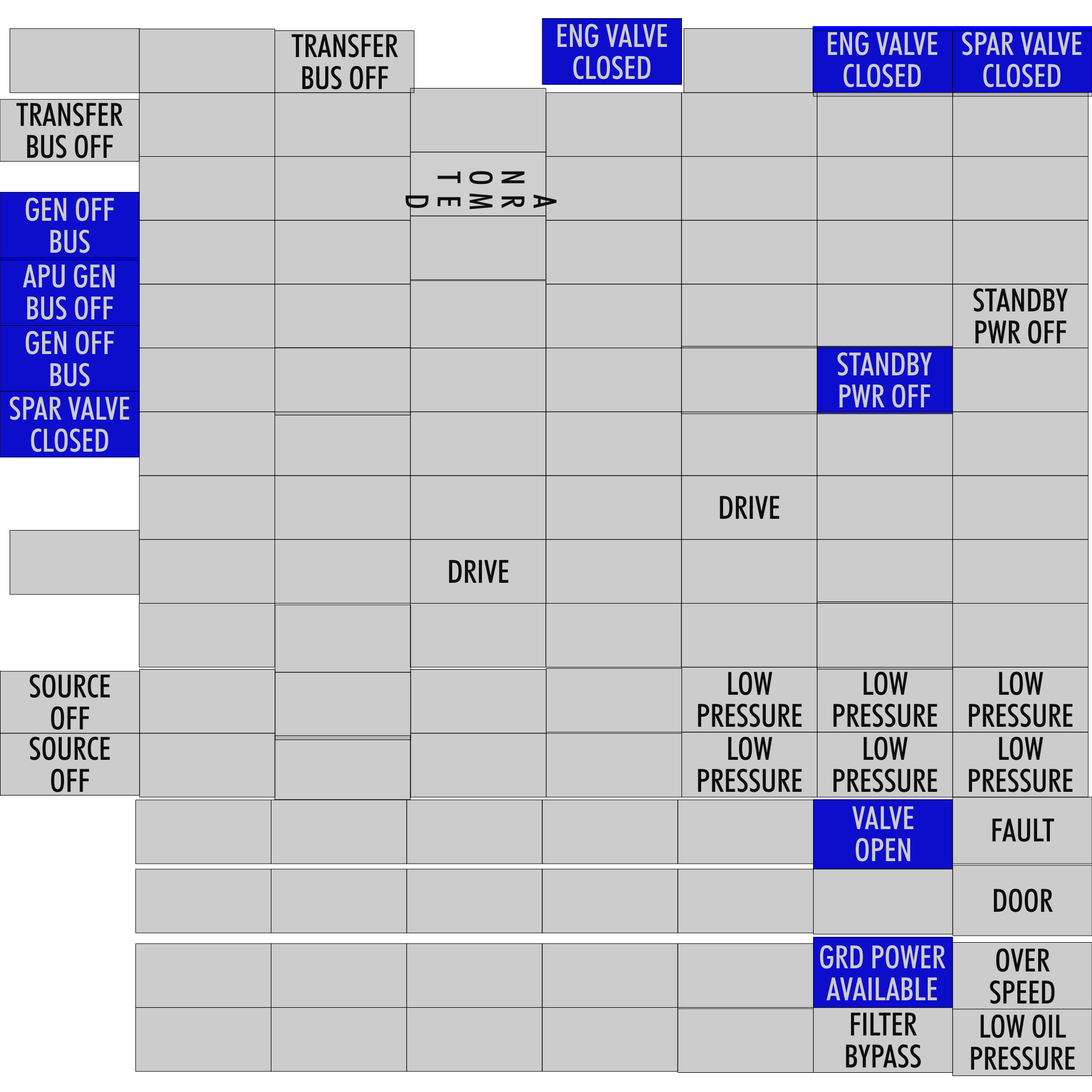
<style>
.page{position:relative;width:1092px;height:1092px;background:#cccccc}
.page>*{position:absolute;margin:0}
.t1{font:32px "FuturaBT-MediumCondensed";color:#cccccc}
.t2{font:32px "FuturaBT-MediumCondensed";color:#000000}
.t3{font:32px/24px "FuturaBT-MediumCondensed";color:#000000}
</style>
<div class="page">
<p class="t1" style="left:557px;top:23px;width:110px;height:56px;text-align:center">ENG VALVE<br>CLOSED</p>
<p class="t2" style="left:291px;top:34px;width:107px;height:56px;text-align:center">TRANSFER<br>BUS OFF</p>
<p class="t1" style="left:828px;top:31px;width:109px;height:56px;text-align:center">ENG VALVE<br>CLOSED</p>
<p class="t1" style="left:962px;top:31px;width:120px;height:56px;text-align:center">SPAR VALVE<br>CLOSED</p>
<p class="t2" style="left:16px;top:102px;width:107px;height:56px;text-align:center">TRANSFER<br>BUS OFF</p>
<p class="t3" style="left:405px;top:171px;width:152px;height:39px;text-align:center;rotate:90deg">ARMED<br>NOT</p>
<p class="t1" style="left:26px;top:197px;width:88px;height:56px;text-align:center">GEN OFF<br>BUS</p>
<p class="t1" style="left:23px;top:264px;width:92px;height:56px;text-align:center">APU GEN<br>BUS OFF</p>
<p class="t2" style="left:973px;top:288px;width:95px;height:56px;text-align:center">STANDBY<br>PWR OFF</p>
<p class="t1" style="left:26px;top:331px;width:88px;height:56px;text-align:center">GEN OFF<br>BUS</p>
<p class="t1" style="left:837px;top:352px;width:95px;height:56px;text-align:center">STANDBY<br>PWR OFF</p>
<p class="t1" style="left:10px;top:396px;width:120px;height:56px;text-align:center">SPAR VALVE<br>CLOSED</p>
<p class="t2" style="left:720px;top:496px;width:60px;height:23px">DRIVE</p>
<p class="t2" style="left:449px;top:560px;width:60px;height:23px">DRIVE</p>
<p class="t2" style="left:29px;top:674px;width:81px;height:56px;text-align:center">SOURCE<br>OFF</p>
<p class="t2" style="left:698px;top:671px;width:104px;height:56px;text-align:center">LOW<br>PRESSURE</p>
<p class="t2" style="left:833px;top:671px;width:104px;height:56px;text-align:center">LOW<br>PRESSURE</p>
<p class="t2" style="left:969px;top:671px;width:104px;height:56px;text-align:center">LOW<br>PRESSURE</p>
<p class="t2" style="left:29px;top:736px;width:81px;height:56px;text-align:center">SOURCE<br>OFF</p>
<p class="t2" style="left:698px;top:736px;width:104px;height:56px;text-align:center">LOW<br>PRESSURE</p>
<p class="t2" style="left:833px;top:736px;width:104px;height:56px;text-align:center">LOW<br>PRESSURE</p>
<p class="t2" style="left:969px;top:736px;width:104px;height:56px;text-align:center">LOW<br>PRESSURE</p>
<p class="t1" style="left:852px;top:806px;width:61px;height:56px;text-align:center">VALVE<br>OPEN</p>
<p class="t2" style="left:992px;top:818px;width:62px;height:24px">FAULT</p>
<p class="t2" style="left:993px;top:888px;width:60px;height:24px">DOOR</p>
<p class="t1" style="left:820px;top:945px;width:126px;height:55px;text-align:center">GRD POWER<br>AVAILABLE</p>
<p class="t2" style="left:990px;top:948px;width:65px;height:56px;text-align:center">OVER<br>SPEED</p>
<p class="t2" style="left:846px;top:1013px;width:75px;height:55px;text-align:center">FILTER<br>BYPASS</p>
<p class="t2" style="left:971px;top:1014px;width:104px;height:56px;text-align:center">LOW OIL<br>PRESSURE</p>
</div>
